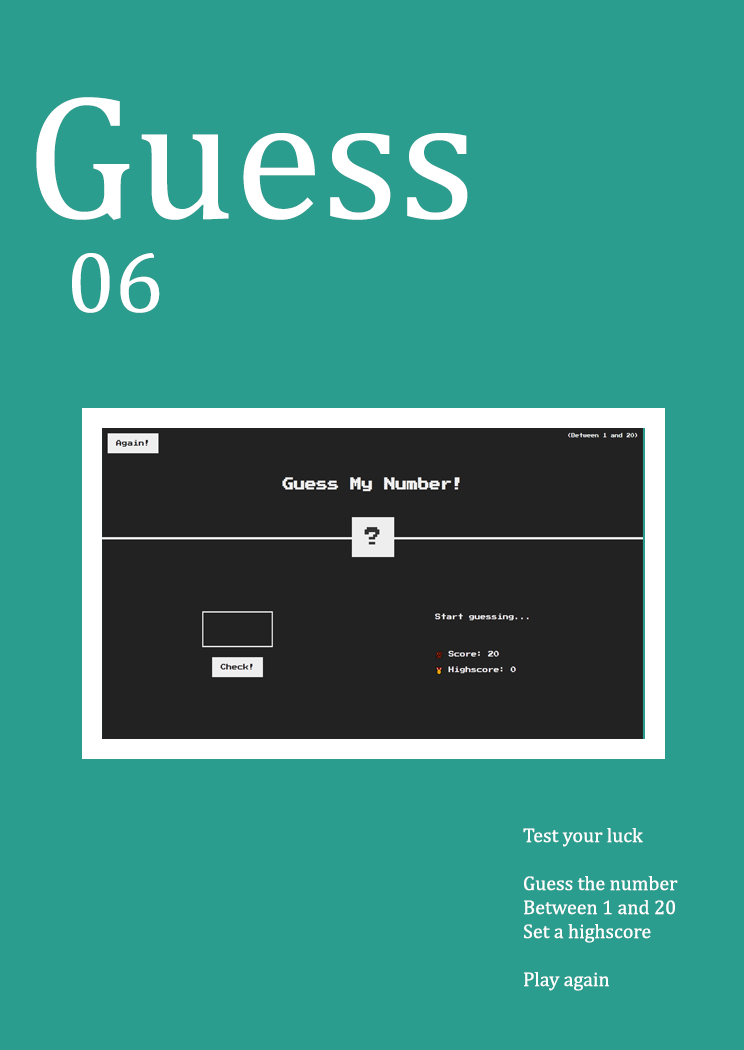
<style>
.page{position:relative;width:744px;height:1050px;background:#2a9d8f}
.page>*{position:absolute;margin:0}
.t1{font:179.3px "Cambria";color:#ffffff}
.t2{font:87.3px "Cambria";color:#ffffff}
.t3{font:20px "Cambria";color:#ffffff}
</style>
<div class="page">
<p class="t1" style="left:36px;top:97px;width:432px;height:123px">Guess</p>
<p class="t2" style="left:72px;top:253px;width:88px;height:60px">06</p>
<p class="t3" style="left:523px;top:828px;width:155px;height:163px">Test your luck<br><br>Guess the number<br>Between 1 and 20<br>Set a highscore<br><br>Play again</p>
</div>
